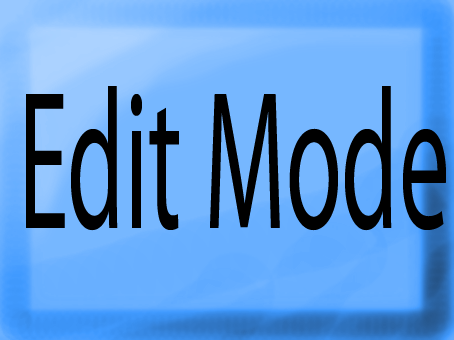
<style>
.page{position:relative;width:454px;height:340px;background:#76b7ff}
.page>*{position:absolute;margin:0}
.t1{font:199.5px "MyriadPro-Regular";color:#000000;scale:0.51 1}
</style>
<div class="page">
<p class="t1" style="left:26px;top:86px;width:420px;height:145px">Edit Mode</p>
</div>
